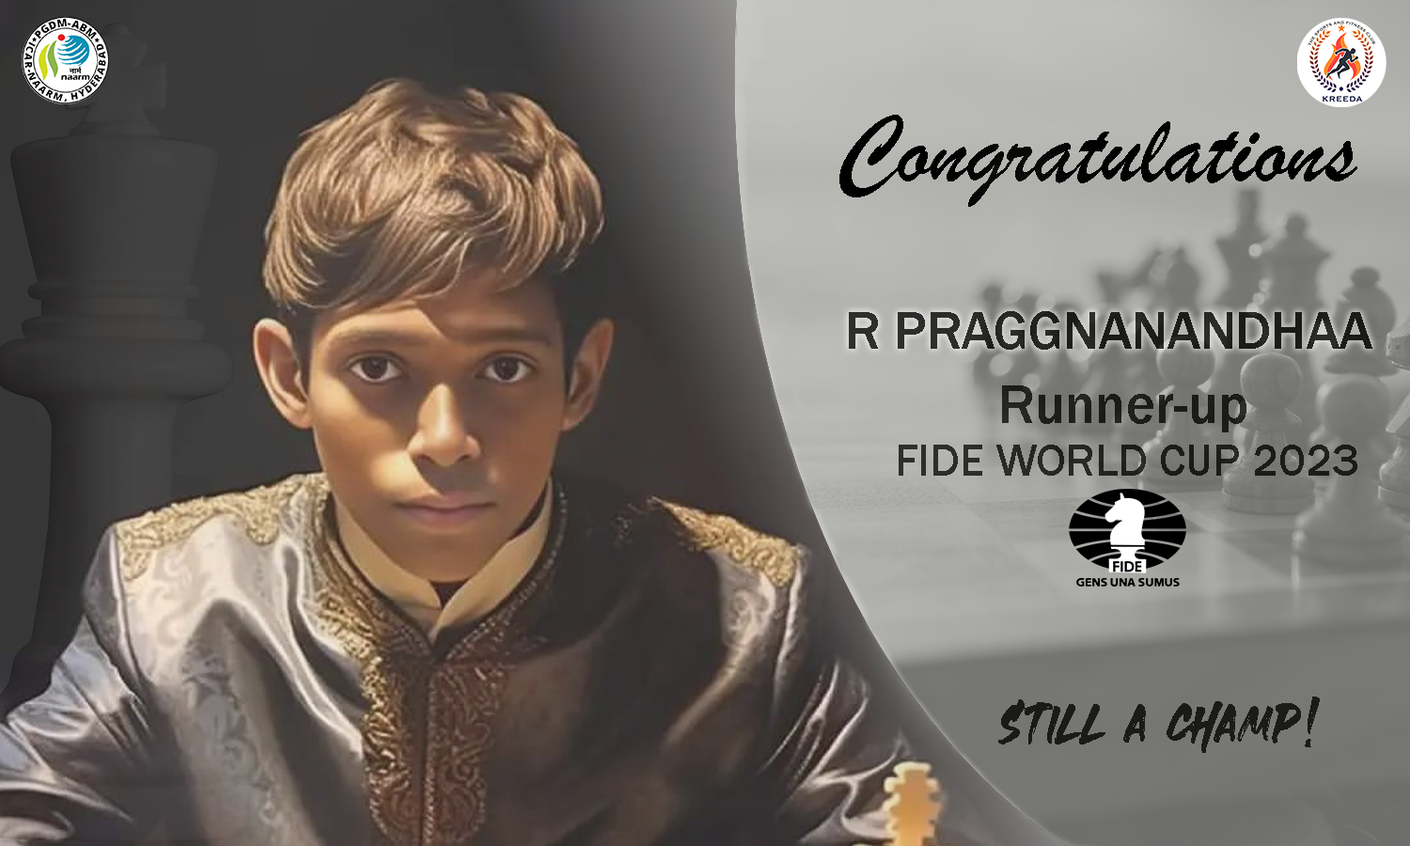
<style>
.page{position:relative;width:1410px;height:846px}
.page>*{position:absolute;margin:0}
.t1{font:102.1px "BrushScriptMT";color:#000000}
.t2{font:54.6px "FranklinGothic-Medium";color:#252524}
.t3{font:56.4px "FranklinGothic-Medium";color:#1c1c1b}
.t4{font:45.8px "FranklinGothic-Medium";color:#222221}
.t5{font:75px "Heaters";color:#1a1a19}
</style>
<div class="page">
<p class="t1" style="left:839px;top:115px;width:518px;height:92px">Congratulations</p>
<p class="t2" style="left:849px;top:311px;width:523px;height:39px">R PRAGGNANANDHAA</p>
<p class="t3" style="left:1002px;top:385px;width:244px;height:47px">Runner-up</p>
<p class="t4" style="left:898px;top:445px;width:459px;height:31px">FIDE WORLD CUP 2023</p>
<p class="t5" style="left:998px;top:696px;width:322px;height:57px">STILL A CHAMP!</p>
</div>
